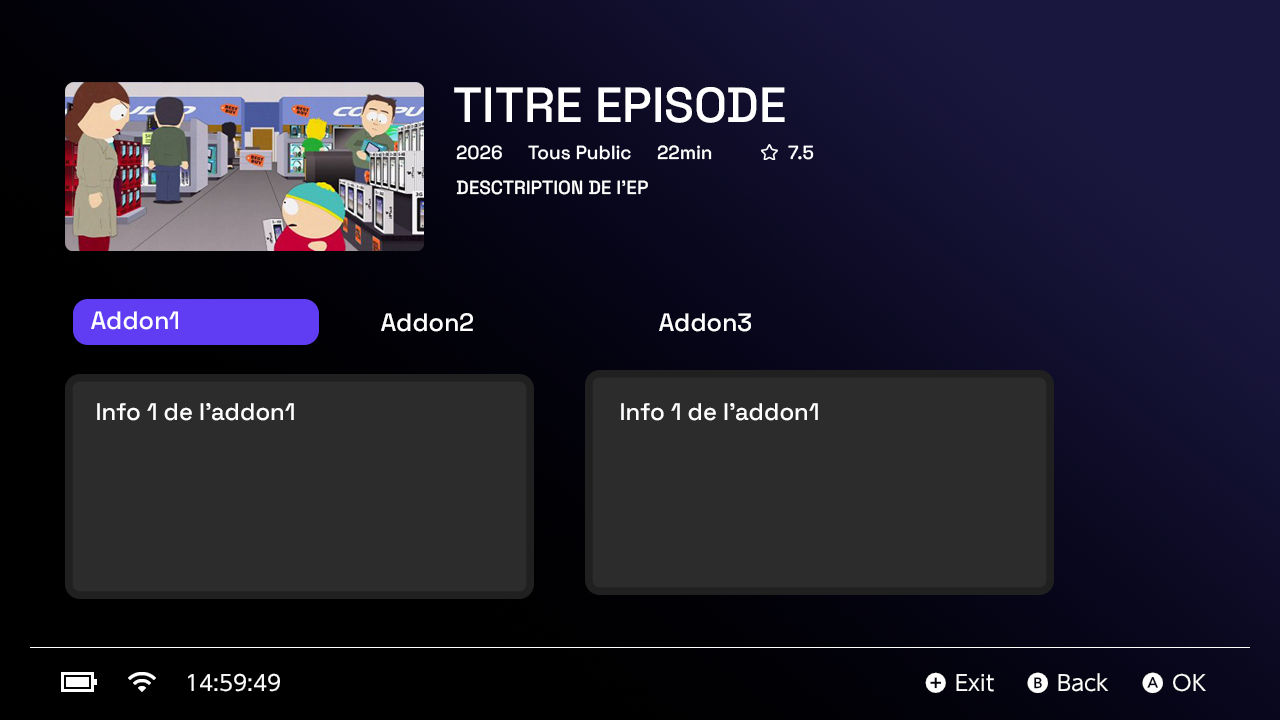
<style>
.page{position:relative;width:1280px;height:720px}
.page>*{position:absolute;margin:0}
.t1{font:49.1px "SpaceGrotesk-Medium";color:#ffffff}
.t2{font:19px "SpaceGrotesk-Medium";color:#ffffff}
.t3{font:25.1px "SpaceGrotesk-Medium";color:#ffffff}
.t4{font:24px "SpaceGrotesk-Medium";color:#ffffff}
</style>
<div class="page">
<p class="t1" style="left:454px;top:87px;width:331px;height:36px">TITRE EPISODE</p>
<p class="t2" style="left:456px;top:145px;width:46px;height:15px">2026</p>
<p class="t2" style="left:528px;top:145px;width:103px;height:15px">Tous Public</p>
<p class="t2" style="left:657px;top:145px;width:55px;height:15px">22min</p>
<p class="t2" style="left:788px;top:145px;width:26px;height:15px">7.5</p>
<p class="t2" style="left:456px;top:180px;width:192px;height:15px">DESCTRIPTION DE l’EP</p>
<p class="t3" style="left:91px;top:311px;width:87px;height:19px">Addon1</p>
<p class="t3" style="left:381px;top:313px;width:92px;height:19px">Addon2</p>
<p class="t3" style="left:659px;top:313px;width:92px;height:19px">Addon3</p>
<p class="t4" style="left:97px;top:403px;width:197px;height:18px">Info 1 de l’addon1</p>
<p class="t4" style="left:621px;top:403px;width:197px;height:18px">Info 1 de l’addon1</p>
</div>
